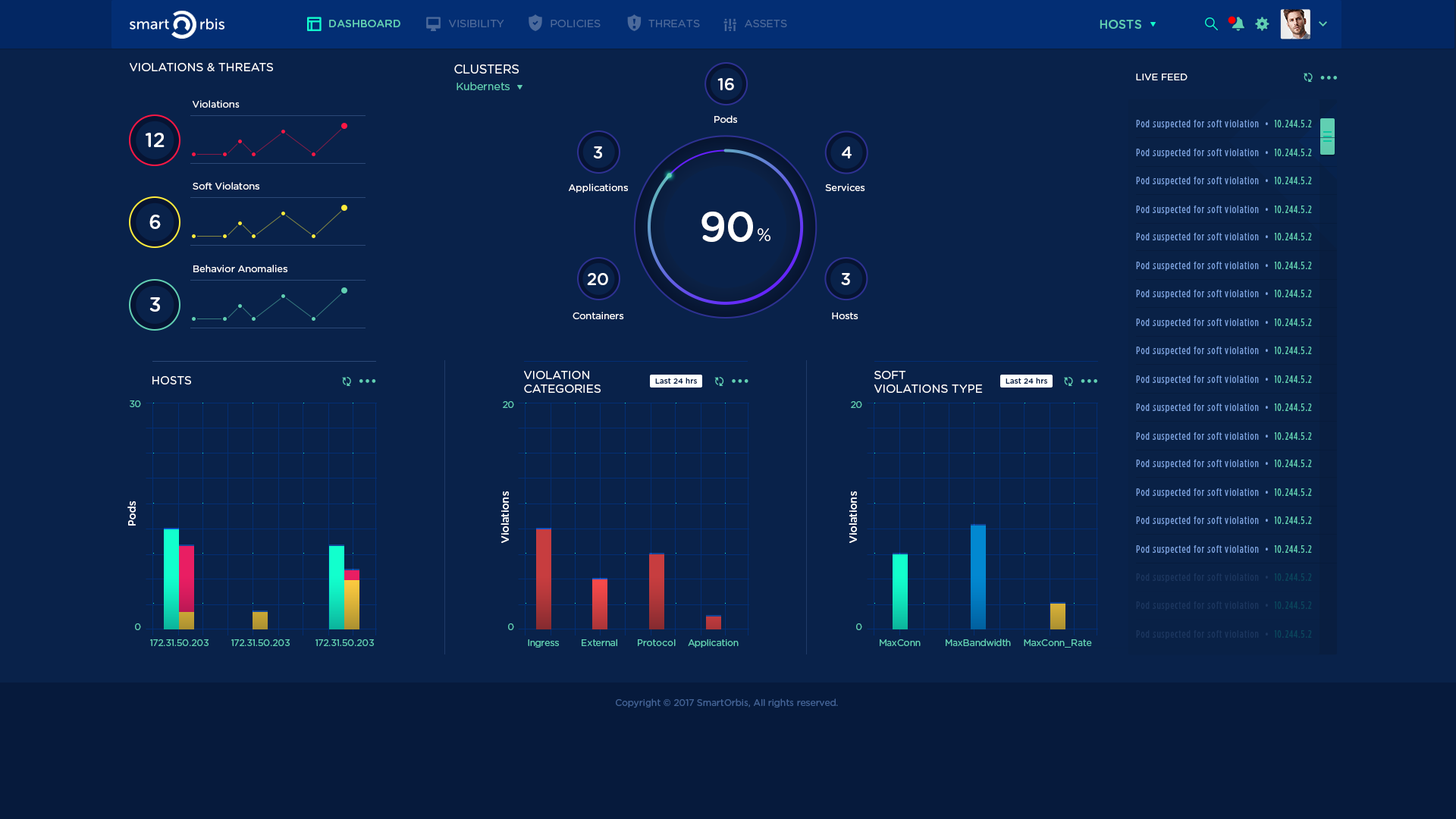
<style>
.page{position:relative;width:1456px;height:819px;background:#09224a}
.page>*{position:absolute;margin:0}
.t1{font:10.5px "GothamRounded-Medium";color:#61cfb2;text-transform:uppercase}
.t2{font:10.5px "GothamRounded-Book";color:#4c6a9b;text-transform:uppercase}
.t3{font:12.1px "GothamRounded-Medium";color:#61cfb2;text-transform:uppercase}
.t4{font:11.6px "GothamRounded-Book";color:#e7e7e7;text-transform:uppercase}
.t5{font:12.1px "GothamRounded-Book";color:#e7e7e7;text-transform:uppercase}
.t6{font:9.6px "GothamRounded-Book";color:#e7e7e7;text-transform:uppercase}
.t7{font:10.6px "GothamRounded-Book";color:#61cfb2}
.t8{font:16.6px "GothamRounded-Medium";color:#ffffff;text-transform:uppercase}
.t9{font:9.6px "GothamRounded-Book";color:#ffffff}
.t10{font:10.6px "GothamHTF-BookCondensed";letter-spacing:0.08em;color:#7aa1df}
.t11{font:10.6px "GothamHTF-BookCondensed";letter-spacing:0.08em;color:#61cfb2}
.t12{font:19.8px "GothamRounded-Medium";color:#ffffff;text-transform:uppercase}
.t13{font:41.4px "GothamRounded-Medium";letter-spacing:-0.025em;color:#ffffff;text-transform:uppercase}
.t14{font:18px "GothamRounded-Light";color:#ffffff;text-transform:uppercase}
.t15{font:7.6px "GothamRounded-Medium";letter-spacing:0.01em;color:#09224a}
.t16{font:9.1px "GothamRounded-Book";letter-spacing:-0.025em;color:#61cfb2}
.t17{font:10.6px "GothamRounded-Medium";color:#ffffff}
.t18{font:10.6px "GothamHTF-BookCondensed";letter-spacing:0.08em;color:#1b365f}
.t19{font:9.1px "GothamRounded-Book";color:#61cfb2}
.t20{font:9.1px "GothamRounded-Book";color:#426295}
</style>
<div class="page">
<p class="t1" style="left:329px;top:20px;width:71px;height:7px">dASHBOARD</p>
<p class="t2" style="left:449px;top:20px;width:55px;height:7px">visibility</p>
<p class="t2" style="left:551px;top:20px;width:50px;height:7px">Policies</p>
<p class="t2" style="left:648px;top:20px;width:52px;height:7px">Threats</p>
<p class="t2" style="left:745px;top:20px;width:42px;height:7px">assets</p>
<p class="t3" style="left:1100px;top:20px;width:41px;height:9px">HOSTS</p>
<p class="t4" style="left:130px;top:63px;width:143px;height:8px">Violations &amp; Threats</p>
<p class="t5" style="left:454px;top:64px;width:65px;height:10px">Clusters</p>
<p class="t6" style="left:1136px;top:74px;width:52px;height:6px">live feed</p>
<p class="t7" style="left:457px;top:82px;width:53px;height:8px">Kubernets</p>
<p class="t8" style="left:717px;top:78px;width:17px;height:12px">16</p>
<p class="t9" style="left:193px;top:100px;width:47px;height:8px">Violations</p>
<p class="t9" style="left:714px;top:115px;width:23px;height:8px">Pods</p>
<p class="t10" style="left:1136px;top:120px;width:176px;height:9px">Pod suspected for soft violation  •  <span class="t11">10.244.5.2</span></p>
<p class="t12" style="left:146px;top:133px;width:19px;height:14px">12</p>
<p class="t8" style="left:594px;top:146px;width:8px;height:12px">3</p>
<p class="t8" style="left:842px;top:146px;width:10px;height:12px">4</p>
<p class="t10" style="left:1136px;top:149px;width:176px;height:9px">Pod suspected for soft violation  •  <span class="t11">10.244.5.2</span></p>
<p class="t9" style="left:193px;top:182px;width:66px;height:8px">Soft Violatons</p>
<p class="t9" style="left:569px;top:184px;width:59px;height:9px">Applications</p>
<p class="t9" style="left:825px;top:184px;width:40px;height:7px">Services</p>
<p class="t10" style="left:1136px;top:177px;width:176px;height:9px">Pod suspected for soft violation  •  <span class="t11">10.244.5.2</span></p>
<p class="t10" style="left:1136px;top:206px;width:176px;height:9px">Pod suspected for soft violation  •  <span class="t11">10.244.5.2</span></p>
<p class="t12" style="left:149px;top:215px;width:12px;height:14px">6</p>
<p class="t13" style="left:701px;top:212px;width:52px;height:30px">90</p>
<p class="t14" style="left:758px;top:228px;width:12px;height:13px">%</p>
<p class="t10" style="left:1136px;top:233px;width:176px;height:9px">Pod suspected for soft violation  •  <span class="t11">10.244.5.2</span></p>
<p class="t9" style="left:193px;top:265px;width:94px;height:7px">Behavior Anomalies</p>
<p class="t10" style="left:1136px;top:262px;width:176px;height:9px">Pod suspected for soft violation  •  <span class="t11">10.244.5.2</span></p>
<p class="t8" style="left:587px;top:273px;width:21px;height:12px">20</p>
<p class="t8" style="left:841px;top:273px;width:9px;height:12px">3</p>
<p class="t10" style="left:1136px;top:290px;width:176px;height:9px">Pod suspected for soft violation  •  <span class="t11">10.244.5.2</span></p>
<p class="t12" style="left:149px;top:297px;width:11px;height:15px">3</p>
<p class="t9" style="left:573px;top:312px;width:51px;height:7px">Containers</p>
<p class="t9" style="left:832px;top:312px;width:26px;height:7px">Hosts</p>
<p class="t10" style="left:1136px;top:318px;width:176px;height:10px">Pod suspected for soft violation  •  <span class="t11">10.244.5.2</span></p>
<p class="t10" style="left:1136px;top:347px;width:176px;height:9px">Pod suspected for soft violation  •  <span class="t11">10.244.5.2</span></p>
<p class="t4" style="left:152px;top:376px;width:39px;height:8px">HOSTS</p>
<p class="t4" style="left:524px;top:371px;width:77px;height:22px">Violation <br>Categories</p>
<p class="t15" style="left:655px;top:378px;width:42px;height:6px">Last 24 hrs</p>
<p class="t4" style="left:874px;top:371px;width:109px;height:22px">Soft <br>Violations Type</p>
<p class="t15" style="left:1006px;top:378px;width:41px;height:6px">Last 24 hrs</p>
<p class="t10" style="left:1136px;top:375px;width:176px;height:9px">Pod suspected for soft violation  •  <span class="t11">10.244.5.2</span></p>
<p class="t16" style="left:130px;top:400px;width:11px;height:7px">30</p>
<p class="t16" style="left:503px;top:401px;width:11px;height:7px">20</p>
<p class="t16" style="left:851px;top:401px;width:11px;height:7px">20</p>
<p class="t10" style="left:1136px;top:403px;width:176px;height:10px">Pod suspected for soft violation  •  <span class="t11">10.244.5.2</span></p>
<p class="t10" style="left:1136px;top:432px;width:176px;height:9px">Pod suspected for soft violation  •  <span class="t11">10.244.5.2</span></p>
<p class="t10" style="left:1136px;top:460px;width:176px;height:9px">Pod suspected for soft violation  •  <span class="t11">10.244.5.2</span></p>
<p class="t17" style="left:500px;top:491px;width:9px;height:52px;rotate:-90deg">Violations</p>
<p class="t17" style="left:849px;top:491px;width:8px;height:52px;rotate:-90deg">Violations</p>
<p class="t10" style="left:1136px;top:488px;width:176px;height:9px">Pod suspected for soft violation  •  <span class="t11">10.244.5.2</span></p>
<p class="t17" style="left:127px;top:501px;width:9px;height:25px;rotate:-90deg">Pods</p>
<p class="t10" style="left:1136px;top:516px;width:176px;height:10px">Pod suspected for soft violation  •  <span class="t11">10.244.5.2</span></p>
<p class="t10" style="left:1136px;top:545px;width:176px;height:9px">Pod suspected for soft violation  •  <span class="t11">10.244.5.2</span></p>
<p class="t18" style="left:1136px;top:573px;width:176px;height:9px">Pod suspected for soft violation  •  10.244.5.2</p>
<p class="t18" style="left:1136px;top:601px;width:176px;height:9px">Pod suspected for soft violation  •  10.244.5.2</p>
<p class="t19" style="left:135px;top:623px;width:6px;height:7px">0</p>
<p class="t19" style="left:508px;top:623px;width:6px;height:7px">0</p>
<p class="t19" style="left:856px;top:623px;width:6px;height:7px">0</p>
<p class="t19" style="left:150px;top:639px;width:59px;height:7px">172.31.50.203</p>
<p class="t19" style="left:231px;top:639px;width:59px;height:7px">172.31.50.203</p>
<p class="t19" style="left:315px;top:639px;width:59px;height:7px">172.31.50.203</p>
<p class="t19" style="left:528px;top:639px;width:31px;height:9px">Ingress</p>
<p class="t19" style="left:582px;top:639px;width:35px;height:7px">External</p>
<p class="t19" style="left:638px;top:639px;width:38px;height:7px">Protocol</p>
<p class="t19" style="left:688px;top:639px;width:51px;height:9px">Application</p>
<p class="t19" style="left:880px;top:639px;width:41px;height:7px">MaxConn</p>
<p class="t19" style="left:946px;top:639px;width:65px;height:7px">MaxBandwidth</p>
<p class="t19" style="left:1024px;top:639px;width:68px;height:9px">MaxConn_Rate</p>
<p class="t18" style="left:1136px;top:630px;width:176px;height:9px">Pod suspected for soft violation  •  10.244.5.2</p>
<p class="t20" style="left:616px;top:698px;width:222px;height:10px">Copyright © 2017 SmartOrbis, All rights reserved.</p>
</div>
